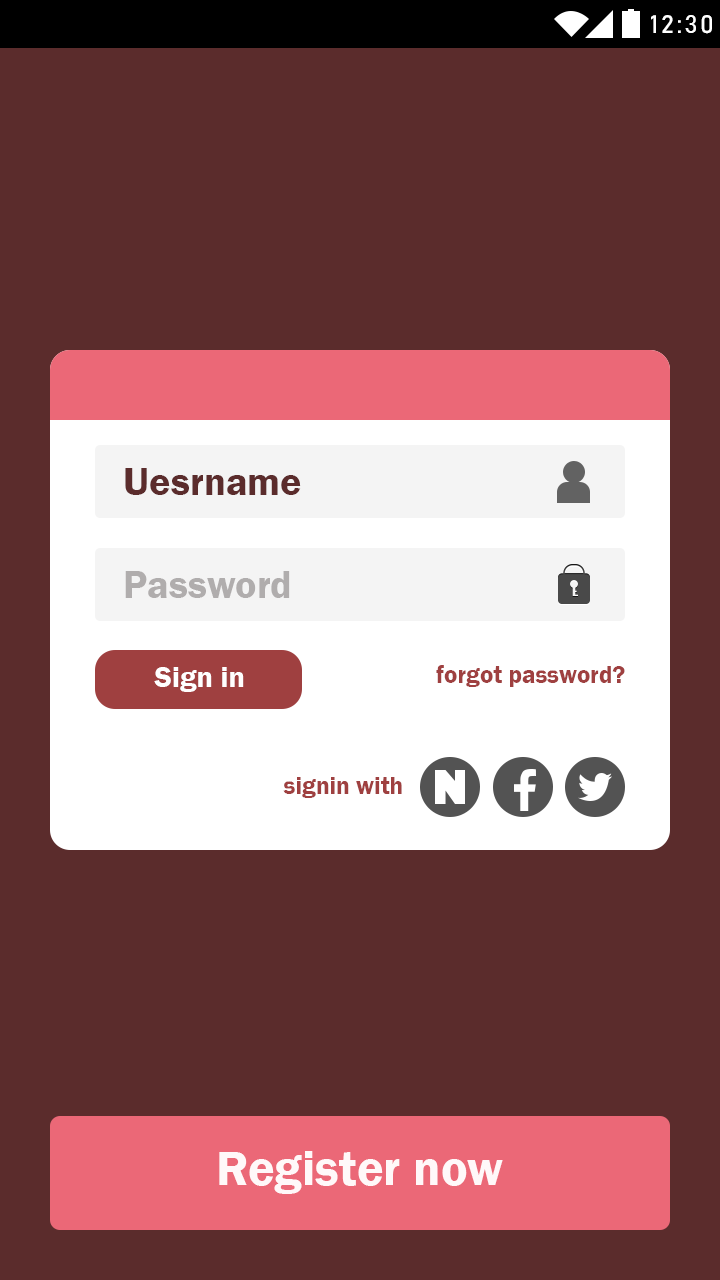
<style>
.page{position:relative;width:720px;height:1280px;background:#5b2c2c}
.page>*{position:absolute;margin:0}
.t1{font:25px "Bahnschrift";letter-spacing:0.1em;color:#ffffff}
.t2{font:40px "FranklinGothic-Demi";color:#5b2c2c}
.t3{font:40px "FranklinGothic-Demi";color:#b0adad}
.t4{font:25px "FranklinGothic-Demi";color:#9f4040}
.t5{font:30px "FranklinGothic-Demi";color:#ffffff}
.t6{font:50px "FranklinGothic-Demi";color:#fff8f9}
</style>
<div class="page">
<p class="t1" style="left:651px;top:15px;width:61px;height:19px">12:30</p>
<p class="t2" style="left:125px;top:468px;width:176px;height:27px">Uesrname</p>
<p class="t3" style="left:125px;top:571px;width:165px;height:27px">Password</p>
<p class="t4" style="left:436px;top:665px;width:189px;height:22px">forgot password?</p>
<p class="t5" style="left:154px;top:667px;width:90px;height:25px">Sign in</p>
<p class="t4" style="left:283px;top:777px;width:119px;height:21px">signin with</p>
<p class="t6" style="left:219px;top:1151px;width:284px;height:43px">Register now</p>
</div>
